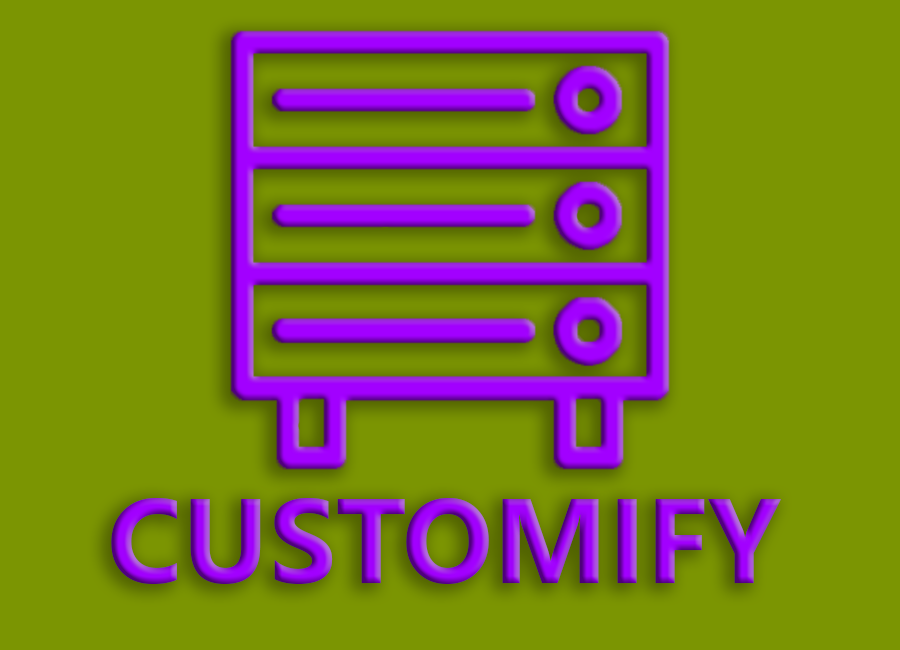
<style>
.page{position:relative;width:900px;height:650px;background:#7b9502}
.page>*{position:absolute;margin:0}
.t1{font:120px "SegoeUI-Bold"}
</style>
<div class="page">
<p class="t1" style="left:111px;top:498px;width:670px;height:86px">CUSTOMIFY</p>
</div>
